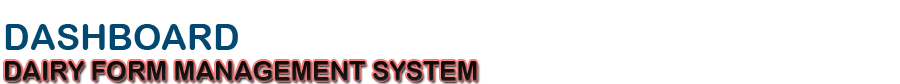
<style>
.page{position:relative;width:900px;height:84px;background:#ffffff}
.page>*{position:absolute;margin:0}
.t1{font:36px "ArialRoundedMTBold";color:#024871}
.t2{font:26px "ArialRoundedMTBold";color:#000000}
</style>
<div class="page">
<p class="t1" style="left:5px;top:24px;width:233px;height:26px">DASHBOARD</p>
<p class="t2" style="left:5px;top:61px;width:472px;height:19px">DAIRY FORM MANAGEMENT SYSTEM</p>
</div>
